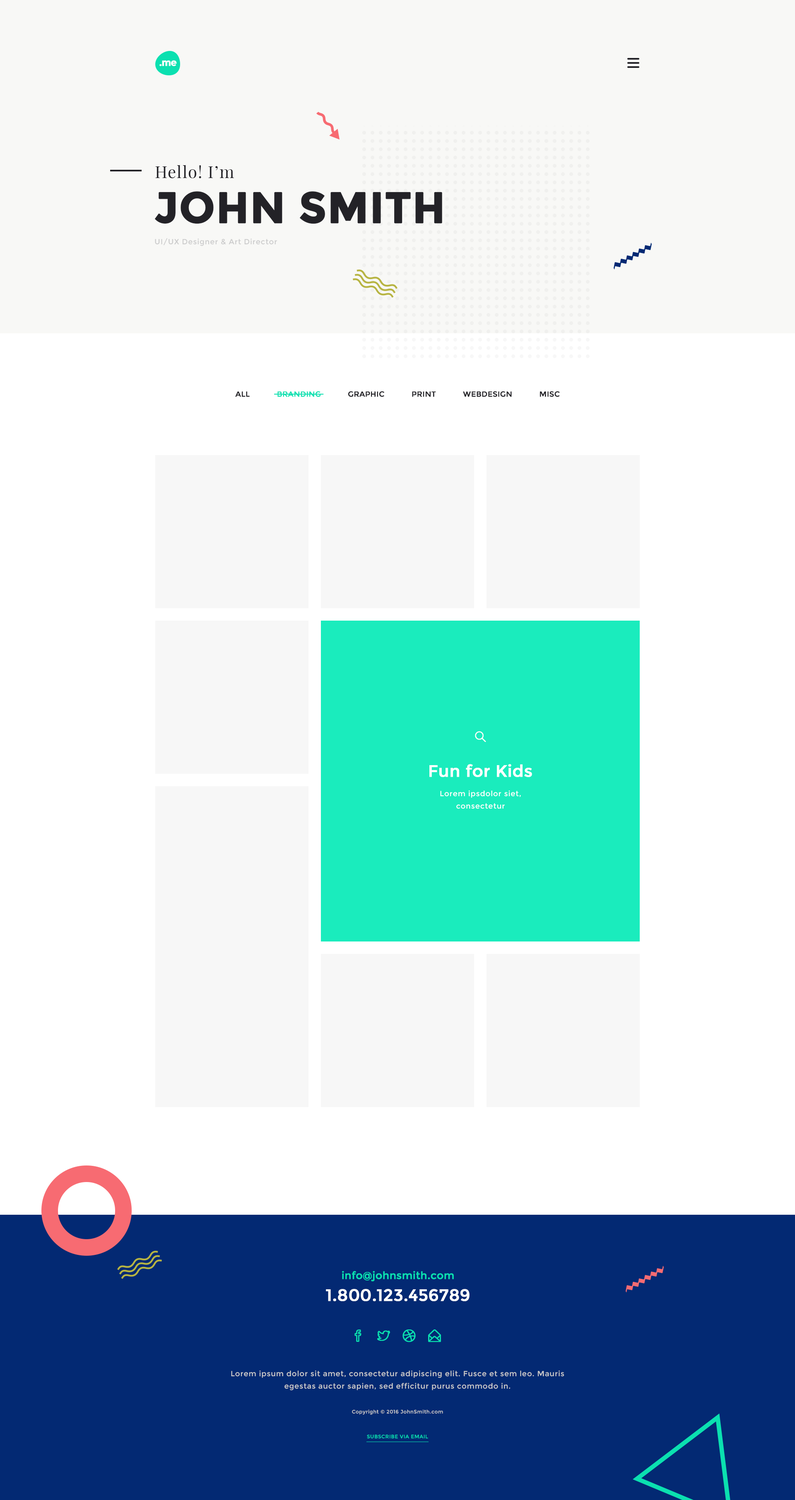
<style>
.page{position:relative;width:795px;height:1500px;background:#ffffff}
.page>*{position:absolute;margin:0}
.t1{font:9.8px "Montserrat-Bold";letter-spacing:-0.06em;color:#ffffff;font-weight:bold}
.t2{font:16.6px "PlayfairDisplay-Regular";letter-spacing:0.05em;color:#232227}
.t3{font:43.1px "Montserrat-Bold";color:#232227;text-transform:uppercase;font-weight:bold}
.t4{font:7.5px "Montserrat-Regular";letter-spacing:0.05em;color:#cccccc}
.t5{font:7.5px "Montserrat-Regular";color:#232227;font-weight:bold}
.t6{font:7.5px "Montserrat-Regular";color:#0be0b0;font-weight:bold}
.t7{font:16.6px "Montserrat-Regular";color:#ffffff;font-weight:bold}
.t8{font:7.5px/12.4px "Montserrat-Regular";letter-spacing:0.05em;color:#ffffff}
.t9{font:10.4px/21.9px "Montserrat-Regular";color:#0be0b0;font-weight:bold}
.t10{font:16.6px/21.9px "Montserrat-Regular";color:#ffffff;font-weight:bold}
.t11{font:7.5px/12.4px "Montserrat-Regular";letter-spacing:0.05em;color:#cccccc}
.t12{font:5px/12.4px "Montserrat-Regular";letter-spacing:0.05em;color:#cccccc}
.t13{font:5px/12.4px "Montserrat-Regular";letter-spacing:0.05em;color:#0be0b0}
</style>
<div class="page">
<p class="t1" style="left:159px;top:60px;width:18px;height:6px">.me</p>
<p class="t2" style="left:155px;top:165px;width:79px;height:13px">Hello! I’m</p>
<p class="t3" style="left:154px;top:191px;width:288px;height:33px">JOHN SMITH</p>
<p class="t4" style="left:155px;top:238px;width:122px;height:8px">UI/UX Designer &amp; Art Director</p>
<p class="t5" style="left:235px;top:391px;width:325px;height:6px">ALL            <span class="t6">BRANDING </span>           GRAPHIC            PRINT            WEBDESIGN            MISC</p>
<p class="t7" style="left:429px;top:764px;width:103px;height:13px">Fun for Kids</p>
<p class="t8" style="left:440px;top:790px;width:81px;height:19px;text-align:center">Lorem ipsdolor siet, consectetur</p>
<p class="t9" style="left:326px;top:1271px;width:144px;height:30px;text-align:center">info@johnsmith.com<br><span class="t10">1.800.123.456789</span></p>
<p class="t11" style="left:231px;top:1370px;width:333px;height:69px;text-align:center">Lorem ipsum dolor sit amet, consectetur adipiscing elit. Fusce et sem leo. Mauris egestas auctor sapien, sed efficitur purus commodo in. <br><br><span class="t12">Copyright © 2016 JohnSmith.com<br><br></span><span class="t13">SUBSCRIBE VIA EMAIL</span></p>
</div>
